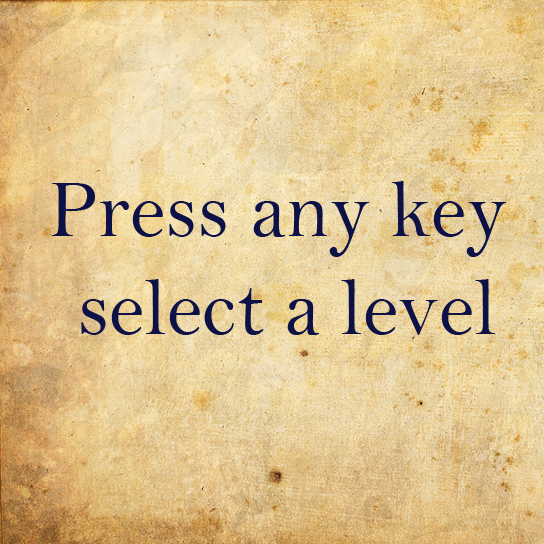
<style>
.page{position:relative;width:544px;height:544px}
.page>*{position:absolute;margin:0}
.t1{font:81.6px "BellMT";color:#0d1146}
</style>
<div class="page">
<p class="t1" style="left:51px;top:181px;width:469px;height:154px">Press any key and<br> select a level to play</p>
</div>
